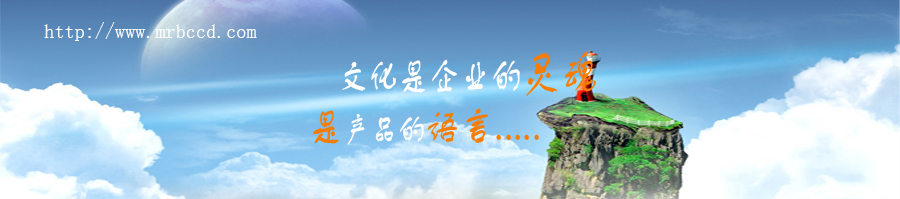
<style>
.page{position:relative;width:900px;height:199px}
.page>*{position:absolute;margin:0}
.t1{font:20.2px "SimSun";color:#ffffff}
.t2{font:40.8px "FZSTK--GBK1-0";color:#ffffff;scale:0.76 1}
.t3{font:51px "FZSTK--GBK1-0";color:#f67c04;scale:0.76 1}
.t4{font:42px "FZSTK--GBK1-0";color:#f67c04;scale:0.82 1}
.t5{font:33.6px "FZSTK--GBK1-0";color:#ffffff;scale:0.82 1}
</style>
<div class="page">
<p class="t1" style="left:44px;top:22px;width:213px;height:19px">http://www.mrbccd.com</p>
<p class="t2" style="left:342px;top:51px;width:254px;height:45px">文化是企业的<span class="t3">灵魂</span></p>
<p class="t4" style="left:313px;top:108px;width:226px;height:37px">是<span class="t5">产品的</span>语言.....</p>
</div>
